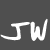
<style>
.page{position:relative;width:50px;height:50px;background:#4f4f4f}
.page>*{position:absolute;margin:0}
.t1{font:40px "John_Walton_Print";letter-spacing:-0.01em;color:#ffffff}
</style>
<div class="page">
<p class="t1" style="left:0px;top:18px;width:48px;height:23px">JW</p>
</div>
